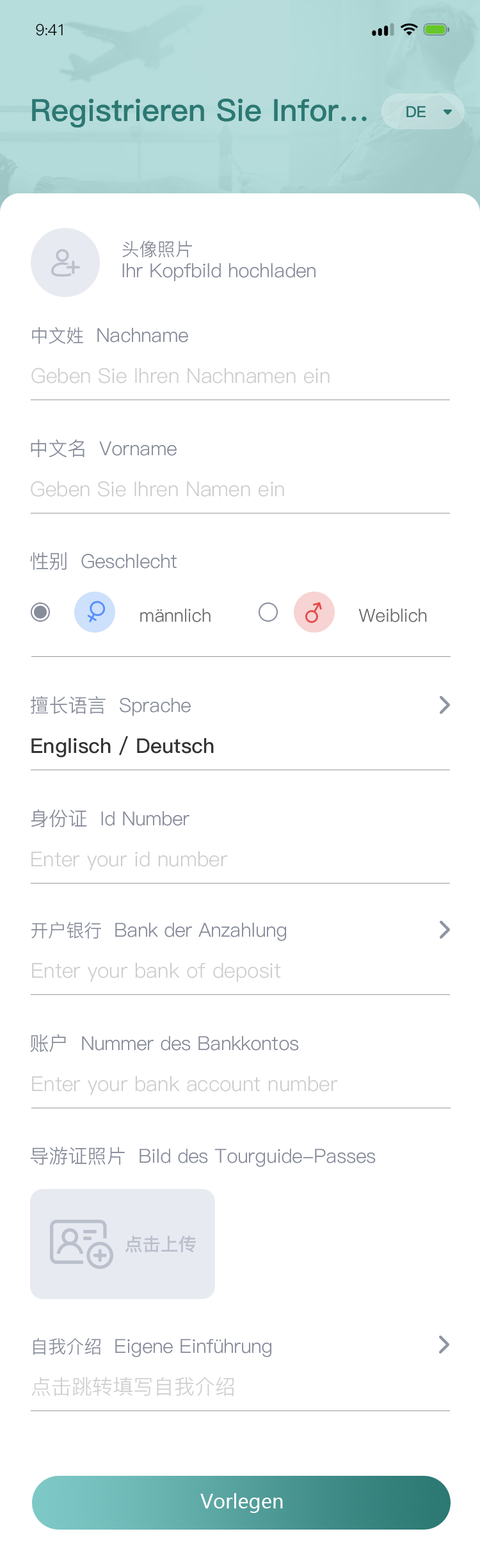
<style>
.page{position:relative;width:480px;height:1568px;background:#ffffff}
.page>*{position:absolute;margin:0}
.t1{font:15.4px "PingFang-SC-Regular";letter-spacing:-0.025em;color:#000000}
.t2{font:30.7px "PingFang-SC-Bold";color:#2c7873}
.t3{font:15.4px "PingFang-SC-Bold";color:#2c7873}
.t4{font:17.9px "PingFang-SC-Regular";color:#878c9a}
.t5{font:19.2px "PingFang-SC-Regular";color:#878c9a}
.t6{font:17.9px "PingFang-SC-Regular";color:#878c9a;text-transform:uppercase}
.t7{font:20.5px "PingFang-SC-Regular";color:#cccccc}
.t8{font:19.2px "PingFang-SC-Regular";color:#878c9a;text-transform:uppercase}
.t9{font:17.9px "PingFang-SC-Regular";color:#666666}
.t10{font:20.5px "PingFang-SC-Bold";color:#333333}
.t11{font:17.9px "PingFang-SC-Bold";color:#bbc0cd}
.t12{font:19.2px "MicrosoftYaHei";color:#ffffff}
</style>
<div class="page">
<p class="t1" style="left:36px;top:24px;width:27px;height:12px">9:41</p>
<p class="t2" style="left:32px;top:99px;width:335px;height:29px">Registrieren Sie Infor…</p>
<p class="t3" style="left:407px;top:106px;width:19px;height:11px">DE</p>
<p class="t4" style="left:122px;top:241px;width:70px;height:16px">头像照片</p>
<p class="t5" style="left:122px;top:263px;width:194px;height:18px">Ihr Kopfbild hochladen</p>
<p class="t5" style="left:32px;top:327px;width:156px;height:17px"><span class="t6">中文姓  </span>Nachname</p>
<p class="t7" style="left:31px;top:368px;width:299px;height:16px">Geben Sie Ihren Nachnamen ein</p>
<p class="t8" style="left:31px;top:439px;width:146px;height:19px">中文名  V<span class="t5">orname</span></p>
<p class="t7" style="left:31px;top:481px;width:253px;height:16px">Geben Sie Ihren Namen ein</p>
<p class="t5" style="left:30px;top:552px;width:147px;height:18px"><span class="t8">性别  G</span>eschlecht</p>
<p class="t9" style="left:140px;top:608px;width:71px;height:14px">männlich</p>
<p class="t9" style="left:359px;top:608px;width:68px;height:14px">Weiblich</p>
<p class="t8" style="left:31px;top:696px;width:160px;height:20px">擅长语言  S<span class="t5">prache</span></p>
<p class="t10" style="left:31px;top:736px;width:183px;height:21px">Englisch / Deutsch</p>
<p class="t8" style="left:31px;top:809px;width:159px;height:18px">身份证  i<span class="t5">d</span> n<span class="t5">umber</span></p>
<p class="t7" style="left:31px;top:851px;width:197px;height:20px">Enter your id number</p>
<p class="t5" style="left:31px;top:922px;width:255px;height:19px"><span class="t6">开户银行 </span><span class="t8"> B</span>ank der Anzahlung</p>
<p class="t7" style="left:32px;top:962px;width:249px;height:20px">Enter your bank of deposit</p>
<p class="t5" style="left:30px;top:1034px;width:269px;height:18px"><span class="t8">账户  N</span>ummer des Bankkontos</p>
<p class="t7" style="left:32px;top:1076px;width:306px;height:19px">Enter your bank account number</p>
<p class="t5" style="left:31px;top:1147px;width:345px;height:20px"><span class="t8">导游证照片  B</span>ild des Tourguide-Passes</p>
<p class="t11" style="left:125px;top:1236px;width:71px;height:17px">点击上传</p>
<p class="t5" style="left:33px;top:1338px;width:238px;height:19px"><span class="t6">自我介绍  </span>Eigene Einführung</p>
<p class="t7" style="left:31px;top:1377px;width:203px;height:19px">点击跳转填写自我介绍</p>
<p class="t12" style="left:200px;top:1493px;width:83px;height:20px">Vorlegen</p>
</div>
